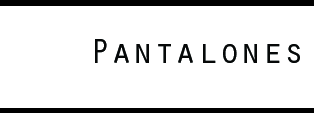
<style>
.page{position:relative;width:314px;height:113px;background:#ffffff}
.page>*{position:absolute;margin:0}
.t1{font:36px "OratorStd";color:#060808}
</style>
<div class="page">
<p class="t1" style="left:95px;top:39px;width:205px;height:24px">Pantalones</p>
</div>
